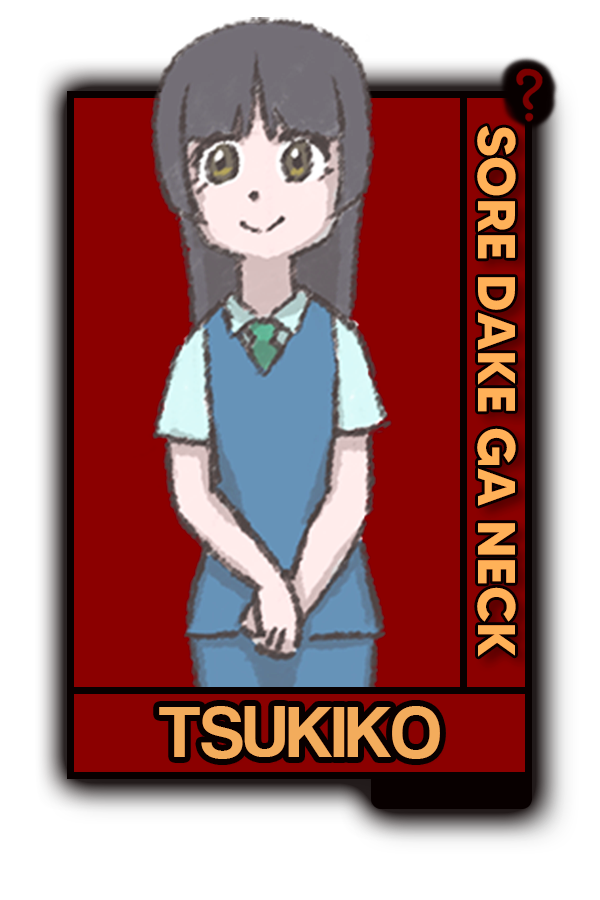
<style>
.page{position:relative;width:600px;height:900px;background:#8b0000}
.page>*{position:absolute;margin:0}
.t1{font:52.7px "MADETOMMY-Bold";color:#ffb158}
.t2{font:75px "CoolveticaRg-Regular";color:#f3ac5c}
</style>
<div class="page">
<p class="t1" style="left:477px;top:126px;width:39px;height:531px;rotate:90deg">SORE DAKE GA NECK</p>
<p class="t2" style="left:159px;top:706px;width:281px;height:53px">TSUKIKO</p>
</div>
